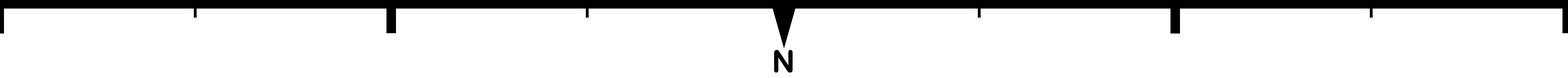
<style>
.page{position:relative;width:1568px;height:78px;background:#ffffff}
.page>*{position:absolute;margin:0}
.t1{font:30.6px "ArialRoundedMTBold";color:#000000}
</style>
<div class="page">
<p class="t1" style="left:774px;top:50px;width:19px;height:23px">N</p>
</div>
